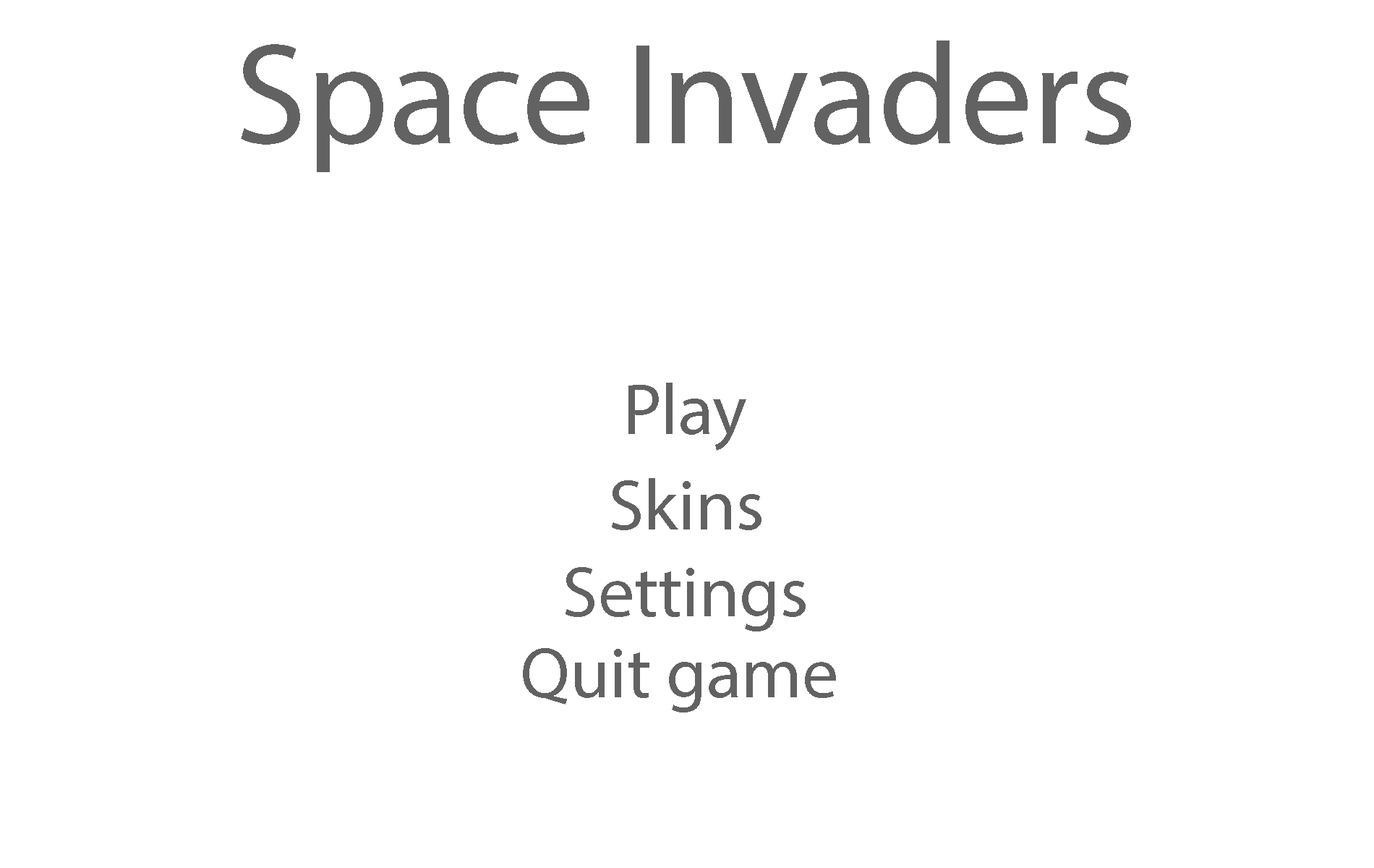
<style>
.page{position:relative;width:1374px;height:868px;background:#ffffff}
.page>*{position:absolute;margin:0}
.t1{font:144.6px "MyriadPro-Regular";color:#626262}
.t2{font:72.3px "MyriadPro-Regular";color:#626262}
</style>
<div class="page">
<p class="t1" style="left:241px;top:40px;width:890px;height:132px">Space Invaders</p>
<p class="t2" style="left:628px;top:383px;width:118px;height:68px">Play</p>
<p class="t2" style="left:612px;top:478px;width:150px;height:52px">Skins</p>
<p class="t2" style="left:566px;top:567px;width:240px;height:64px">Settings</p>
<p class="t2" style="left:523px;top:648px;width:313px;height:64px">Quit game</p>
</div>
